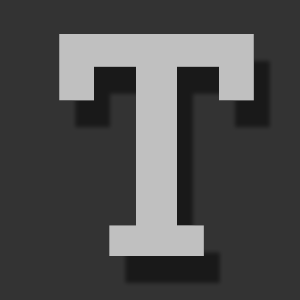
<style>
.page{position:relative;width:300px;height:300px;background:#333333}
.page>*{position:absolute;margin:0}
.t1{font:312.2px "MuseoSlab-700";color:#c0c0c0}
</style>
<div class="page">
<p class="t1" style="left:59px;top:34px;width:195px;height:222px">T</p>
</div>
